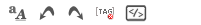
<style>
.page{position:relative;width:201px;height:25px;background:#ffffff}
.page>*{position:absolute;margin:0}
.t1{font:13.4px "Vani-Bold";letter-spacing:-0.075em;color:#696969}
.t2{font:13.4px "Vani-Bold";letter-spacing:-0.075em;color:#555555;font-style:italic}
.t3{font:10px "Small Fonts";color:#6b6b6b;font-variant:small-caps}
.t4{font:9.6px "Small Fonts";color:#a6a0a0}
.t5{font:9.3px "BrushScriptStd";letter-spacing:-0.01em;color:#555555;font-variant:small-caps;scale:0.94 1}
</style>
<div class="page">
<p class="t1" style="left:9px;top:6px;width:18px;height:13px">a<span class="t2">A</span></p>
<p class="t3" style="left:96px;top:7px;width:18px;height:9px"><span class="t4">[</span>tag<span class="t4">]</span></p>
<p class="t5" style="left:129px;top:8px;width:14px;height:9px">&lt;/&gt;</p>
</div>
